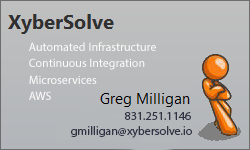
<style>
.page{position:relative;width:250px;height:150px}
.page>*{position:absolute;margin:0}
.t1{font:12px "MyriadPro-Regular";color:#ffffff}
.t2{font:12px "MyriadPro-Regular";color:#2f3343}
</style>
<div class="page">
<p class="t1" style="left:29px;top:42px;width:127px;height:58px">Automated Infrastructure<br>Continuous Integration<br>Microservices<br>AWS</p>
<p class="t2" style="left:71px;top:112px;width:121px;height:26px;text-align:right">831.251.1146<br>gmilligan@xybersolve.io</p>
</div>
